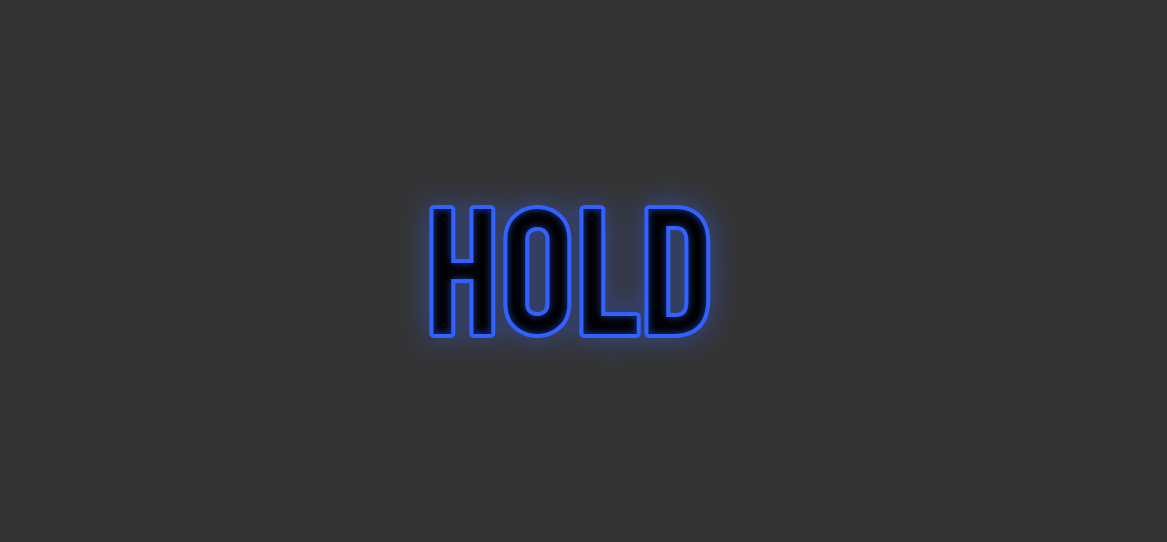
<style>
.page{position:relative;width:1167px;height:542px;background:#333333}
.page>*{position:absolute;margin:0}
.t1{font:175.4px "DINEngschrift";color:#040815}
</style>
<div class="page">
<p class="t1" style="left:433px;top:209px;width:274px;height:125px">HOLD</p>
</div>
